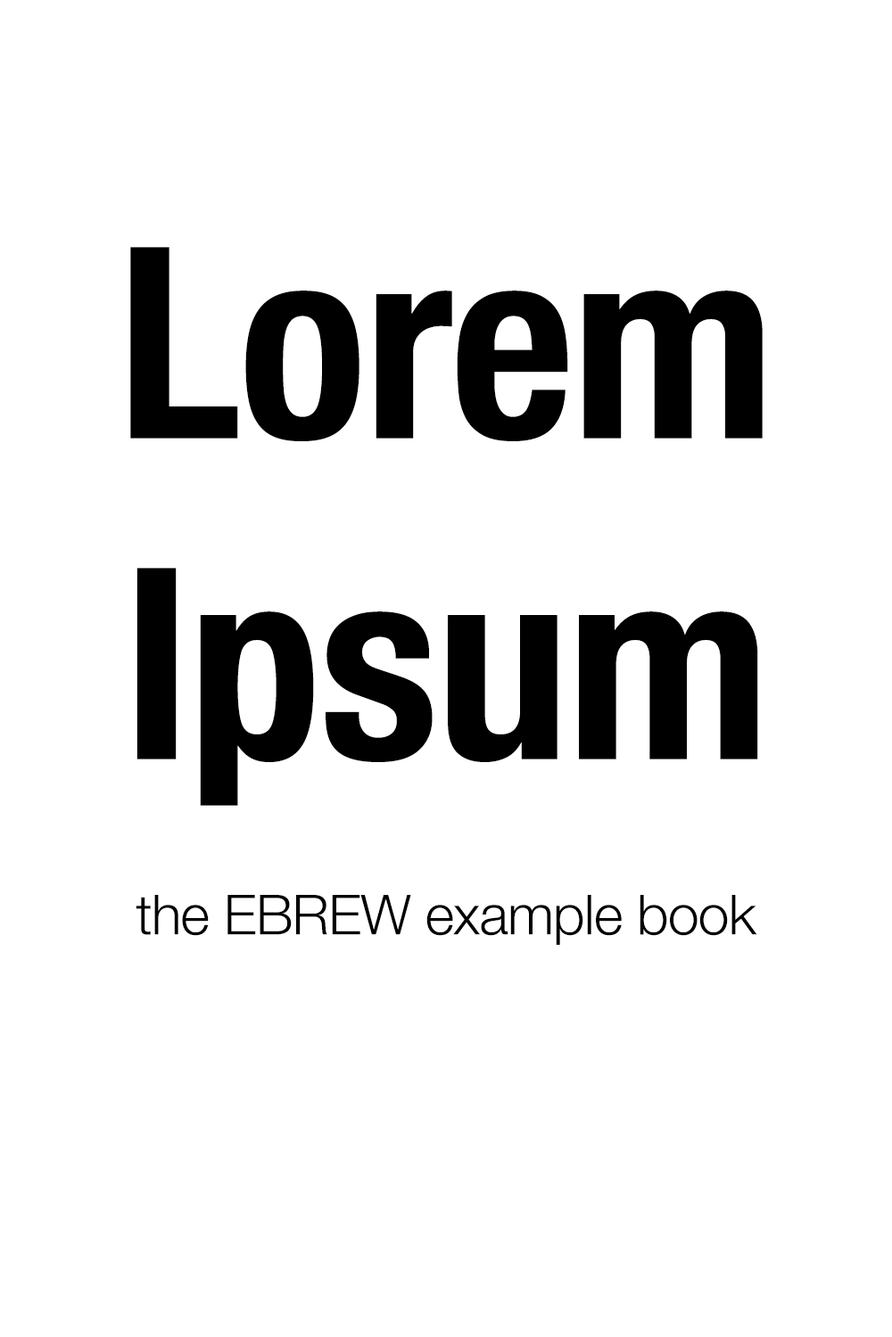
<style>
.page{position:relative;width:892px;height:1337px;background:#ffffff}
.page>*{position:absolute;margin:0}
.t1{font:267.5px "HelveticaNeue-CondensedBold";letter-spacing:-0.01em;color:#000000}
.t2{font:55.3px "HelveticaNeue-Light";letter-spacing:-0.01em;color:#000000}
</style>
<div class="page">
<p class="t1" style="left:130px;top:247px;width:632px;height:559px;text-align:center">Lorem<br>Ipsum</p>
<p class="t2" style="left:136px;top:895px;width:621px;height:50px">the EBREW example book</p>
</div>
